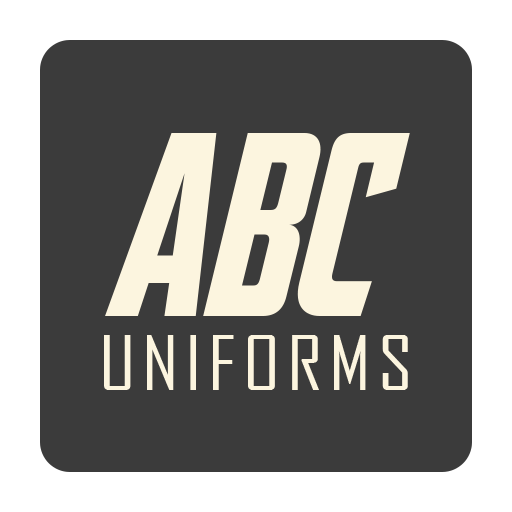
<style>
.page{position:relative;width:512px;height:512px;background:#3b3b3b}
.page>*{position:absolute;margin:0}
.t1{font:252.1px "AvengeanceHeroicAvengerNormal";color:#fcf5df;scale:0.83 1}
.t2{font:71.7px "AgencyFB-Reg";letter-spacing:0.08em;color:#fcf5df;scale:1.16 1}
</style>
<div class="page">
<p class="t1" style="left:105px;top:133px;width:305px;height:183px">abc</p>
<p class="t2" style="left:104px;top:335px;width:304px;height:55px">UNIFORMS</p>
</div>
